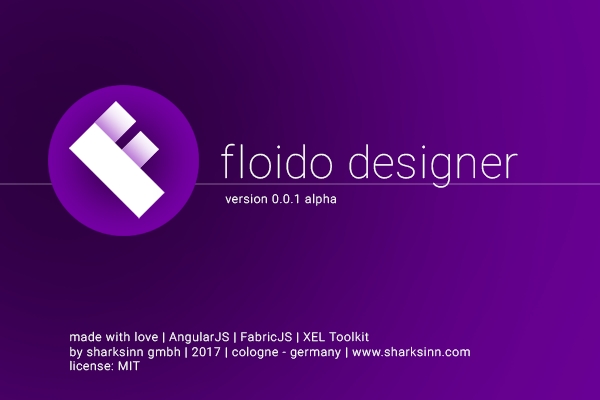
<style>
.page{position:relative;width:600px;height:400px}
.page>*{position:absolute;margin:0}
.t1{font:44.8px "Roboto-Thin";letter-spacing:0.02em;color:#ffffff}
.t2{font:44.8px "Roboto-Thin";letter-spacing:0.06em;color:#ffffff}
.t3{font:44.8px "Roboto-Thin";letter-spacing:0.04em;color:#ffffff}
.t4{font:12px "Roboto-Light";letter-spacing:0.06em;color:#ffffff}
</style>
<div class="page">
<p class="t1" style="left:221px;top:143px;width:297px;height:45px"><span class="t2">f</span><span class="t3">l</span>oido designer</p>
<p class="t4" style="left:225px;top:193px;width:111px;height:13px">version 0.0.1 alpha</p>
<p class="t4" style="left:70px;top:331px;width:400px;height:40px">made with love | AngularJS | FabricJS | XEL Toolkit<br>by sharksinn gmbh | 2017 | cologne - germany | www.sharksinn.com<br>license: MIT</p>
</div>
